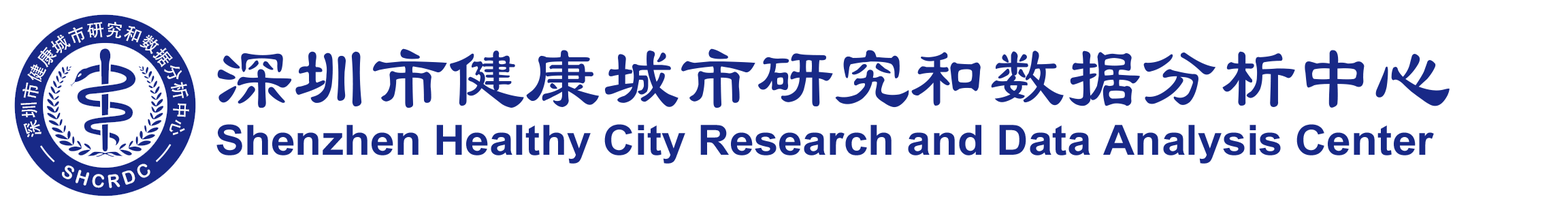
<style>
.page{position:relative;width:1568px;height:210px;background:#ffffff}
.page>*{position:absolute;margin:0}
.t1{font:89.5px "LiSu";color:#182987;scale:0.86 1}
.t2{font:41.7px "ArialNarrow-Bold";color:#182987;scale:1.28 1}
.t3{font:18.3px "ArialRoundedMTBold";letter-spacing:0.2em;color:#ffffff}
</style>
<div class="page">
<p class="t1" style="left:217px;top:48px;width:1233px;height:60px">深圳市健康城市研究和数据分析中心</p>
<p class="t2" style="left:216px;top:124px;width:1218px;height:39px">Shenzhen Healthy City Research and Data Analysis Center</p>
<p class="t3" style="left:62px;top:163px;width:88px;height:25px;rotate:-125deg">SHCRDC</p>
</div>
